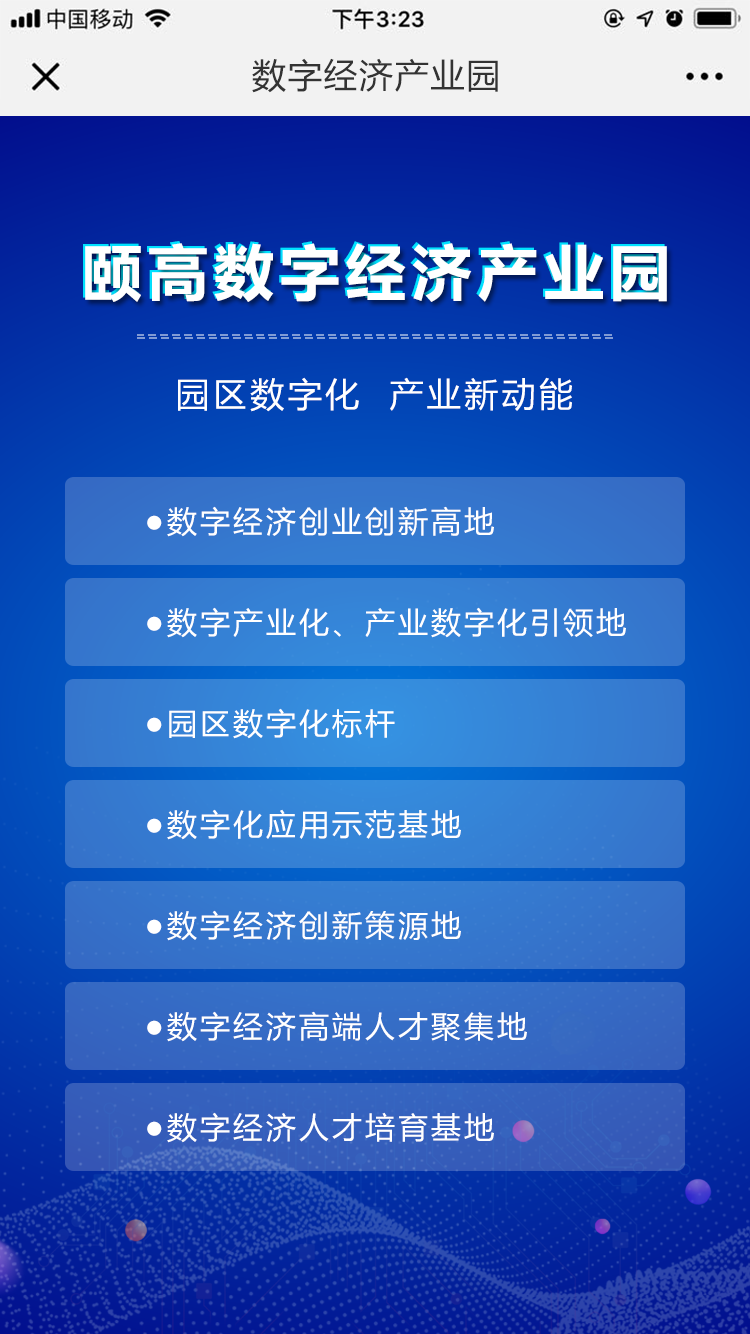
<style>
.page{position:relative;width:750px;height:1334px}
.page>*{position:absolute;margin:0}
.t1{font:34px "MicrosoftYaHei";letter-spacing:0.05em;color:#333333}
.t2{font:60px "MicrosoftYaHei-Bold";letter-spacing:0.1em;color:#ffffff}
.t3{font:34px "MicrosoftYaHei";letter-spacing:0.1em;color:#ffffff}
.t4{font:30px "MicrosoftYaHei";letter-spacing:0.1em;color:#ffffff}
</style>
<div class="page">
<p class="t1" style="left:252px;top:58px;width:246px;height:35px">数字经济产业园</p>
<p class="t2" style="left:83px;top:241px;width:582px;height:59px">颐高数字经济产业园</p>
<p class="t2" style="left:85px;top:243px;width:582px;height:59px">颐高数字经济产业园</p>
<p class="t3" style="left:178px;top:377px;width:394px;height:35px">园区数字化  产业新动能</p>
<p class="t4" style="left:147px;top:506px;width:347px;height:31px">●数字经济创业创新高地</p>
<p class="t4" style="left:147px;top:607px;width:479px;height:31px">●数字产业化、产业数字化引领地</p>
<p class="t4" style="left:147px;top:708px;width:248px;height:31px">●园区数字化标杆</p>
<p class="t4" style="left:147px;top:809px;width:314px;height:31px">●数字化应用示范基地</p>
<p class="t4" style="left:147px;top:910px;width:314px;height:31px">●数字经济创新策源地</p>
<p class="t4" style="left:147px;top:1011px;width:380px;height:31px">●数字经济高端人才聚集地</p>
<p class="t4" style="left:147px;top:1112px;width:347px;height:31px">●数字经济人才培育基地</p>
</div>
